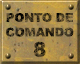
<style>
.page{position:relative;width:80px;height:64px}
.page>*{position:absolute;margin:0}
.t1{font:12px/14.7px "Arial-Black";letter-spacing:-0.015em;text-transform:uppercase}
.t2{font:20px/20px "Arial-Black";letter-spacing:-0.055em;text-transform:uppercase}
</style>
<div class="page">
<p class="t1" style="left:6px;top:13px;width:68px;height:44px;text-align:center">Ponto de<br>comando<br><span class="t2">8</span></p>
</div>
